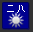
<style>
.page{position:relative;width:33px;height:32px;background:#000090}
.page>*{position:absolute;margin:0}
.t1{font:10.4px "SimSun";color:#ffffff}
</style>
<div class="page">
<p class="t1" style="left:7px;top:5px;width:18px;height:8px">二八</p>
</div>
